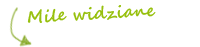
<style>
.page{position:relative;width:200px;height:47px;background:#ffffff}
.page>*{position:absolute;margin:0}
.t1{font:16.7px "SegoeScript-Bold";color:#97c00e;scale:0.97 1}
</style>
<div class="page">
<p class="t1" style="left:27px;top:5px;width:129px;height:18px;rotate:-3deg">Mile widziane</p>
</div>
